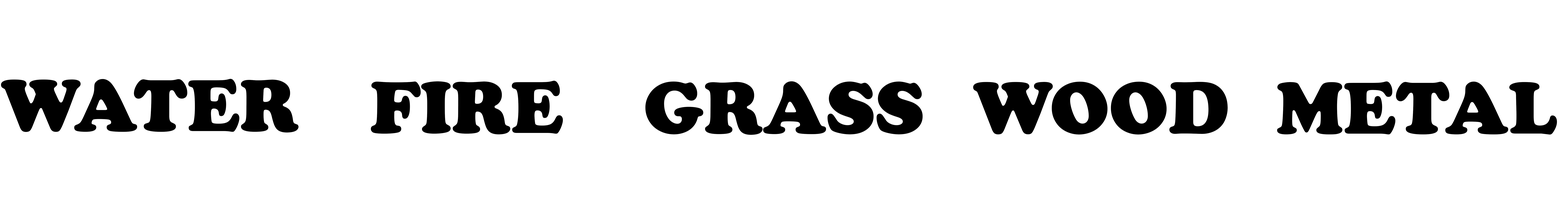
<style>
.page{position:relative;width:1568px;height:216px;background:#ffffff}
.page>*{position:absolute;margin:0}
.t1{font:76.1px "CooperBlack";color:#000000}
</style>
<div class="page">
<p class="t1" style="left:1px;top:79px;width:298px;height:53px">WATER</p>
<p class="t1" style="left:371px;top:81px;width:192px;height:53px">FIRE</p>
<p class="t1" style="left:645px;top:81px;width:278px;height:54px">GRASS</p>
<p class="t1" style="left:973px;top:82px;width:255px;height:52px">WOOD</p>
<p class="t1" style="left:1277px;top:81px;width:280px;height:54px">METAL</p>
</div>
